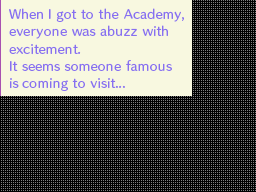
<style>
.page{position:relative;width:256px;height:192px;background:#000000}
.page>*{position:absolute;margin:0}
.t1{font:11.4px/17.3px "HummingStd-D";letter-spacing:0.015em;color:#8870f0}
</style>
<div class="page">
<p class="t1" style="left:9px;top:8px;width:175px;height:83px">When I got to the Academy,<br>everyone was abuzz with<br>excitement.<br>It seems someone famous<br>is coming to visit...</p>
</div>
